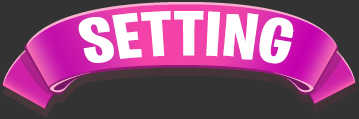
<style>
.page{position:relative;width:359px;height:119px;background:#333333}
.page>*{position:absolute;margin:0}
.t1{font:63.3px "BurbankBigCondensed-Bold";letter-spacing:0.035em;color:#ffffff;text-transform:uppercase;scale:1.17 1}
</style>
<div class="page">
<p class="t1" style="left:78px;top:11px;width:216px;height:53px">Setting</p>
</div>
